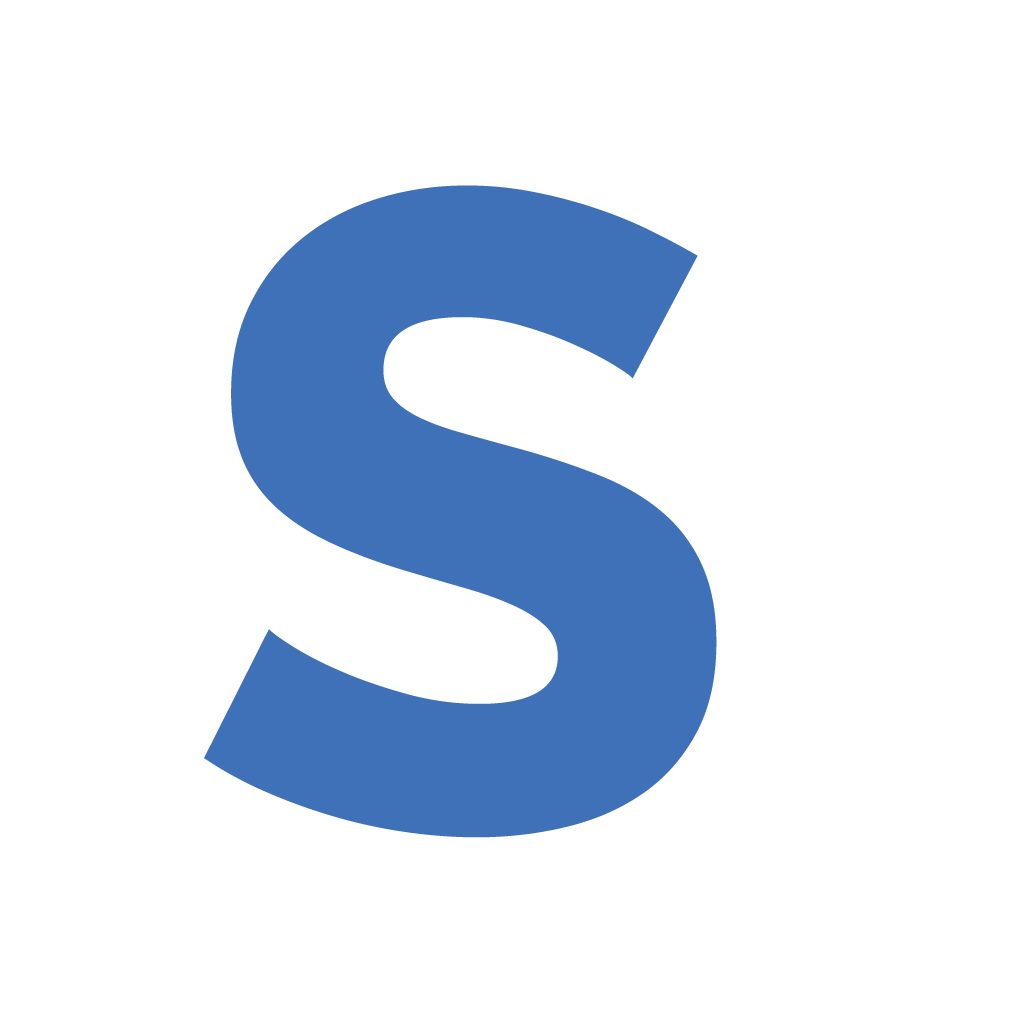
<style>
.page{position:relative;width:1024px;height:1024px;background:#ffffff}
.page>*{position:absolute;margin:0}
.t1{font:900px "Raleway-ExtraBold";color:#3f71b8}
</style>
<div class="page">
<p class="t1" style="left:204px;top:185px;width:513px;height:653px">S</p>
</div>
